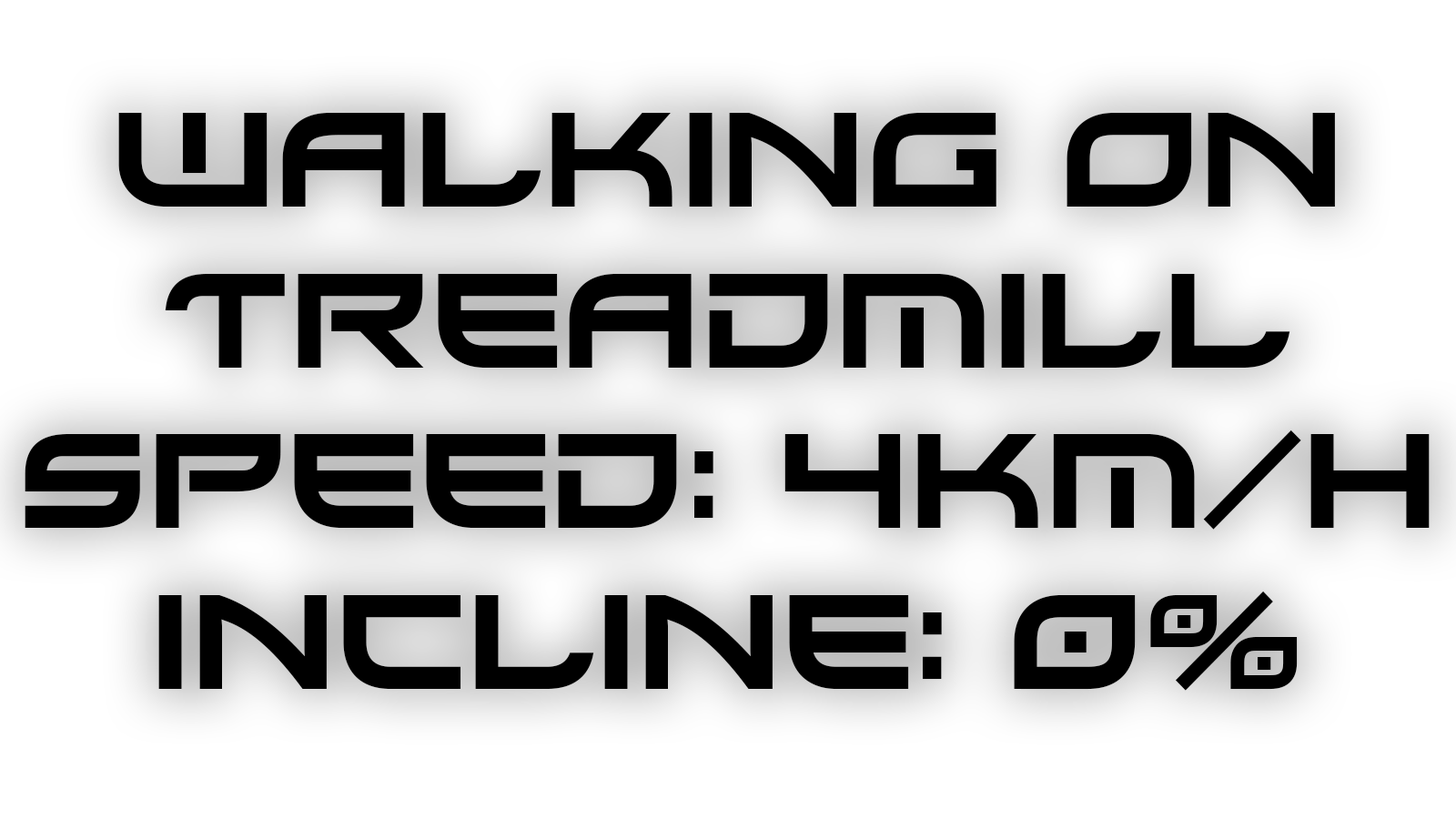
<style>
.page{position:relative;width:1456px;height:819px;background:#ffffff}
.page>*{position:absolute;margin:0}
.t1{font:134px "Xirod-Regular";color:#000000}
</style>
<div class="page">
<p class="t1" style="left:25px;top:113px;width:1405px;height:578px;text-align:center">Walking on<br>Treadmill<br>speed: 4km/h<br>incline: 0%</p>
</div>
